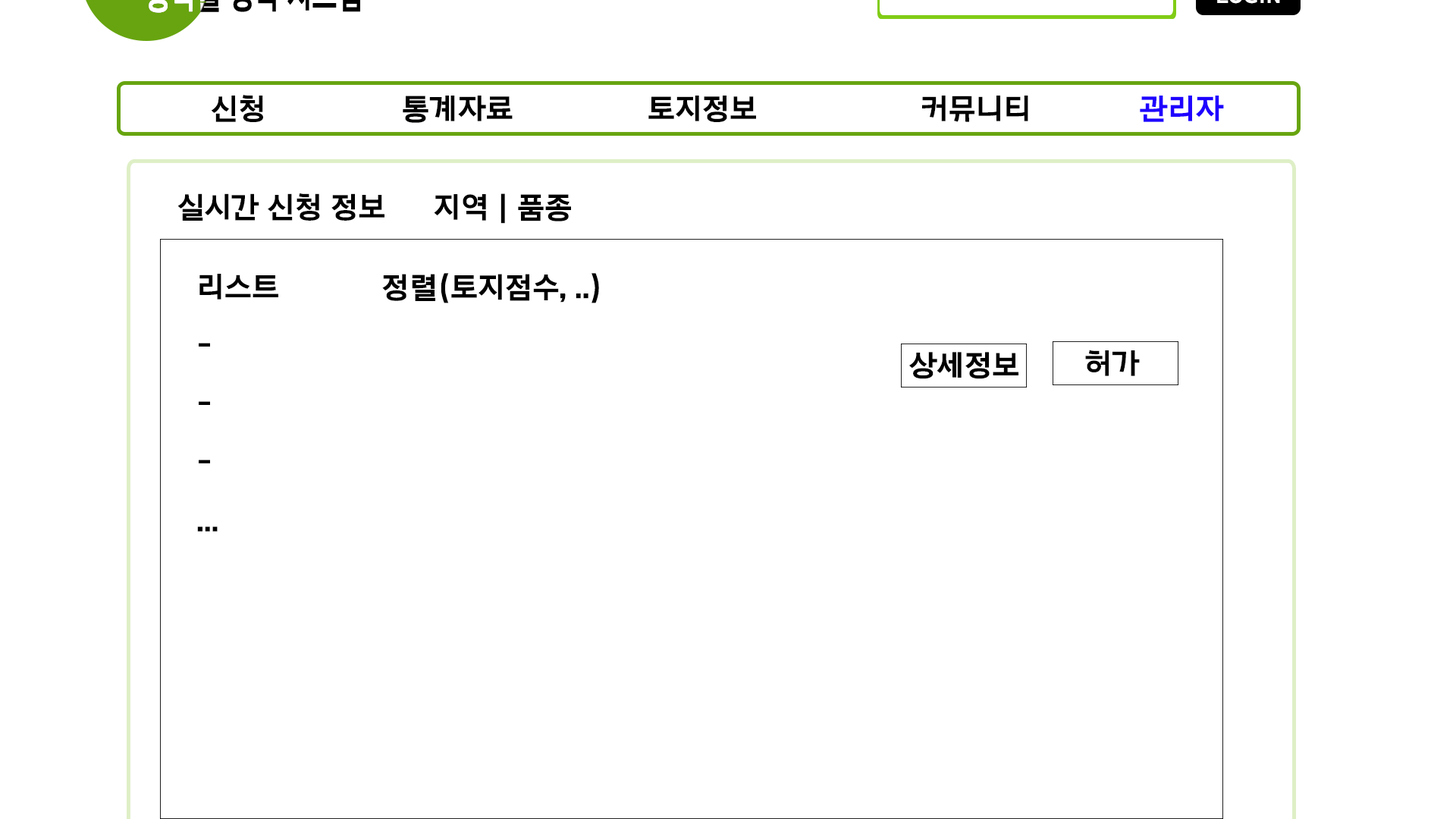
<style>
.page{position:relative;width:1456px;height:819px;background:#ffffff}
.page>*{position:absolute;margin:0}
.t1{font:30.3px "Arita-dotum-Bold_TTF";color:#000000}
.t2{font:30.3px "Arita-dotum-Bold_TTF";color:#1e00ff}
.t3{font:30.3px/58.4px "Arita-dotum-Bold_TTF";color:#000000}
</style>
<div class="page">
<p class="t1" style="left:211px;top:95px;width:1013px;height:28px">신청      통계자료     토지정보      커뮤니티    <span class="t2">관리자</span></p>
<p class="t1" style="left:177px;top:193px;width:207px;height:28px">실시간 신청 정보</p>
<p class="t1" style="left:434px;top:193px;width:137px;height:31px">지역 | 품종</p>
<p class="t3" style="left:197px;top:274px;width:81px;height:258px">리스트<br>-<br>-<br>-<br>...</p>
<p class="t1" style="left:382px;top:273px;width:217px;height:30px">정렬(토지점수, ..)</p>
<p class="t1" style="left:909px;top:352px;width:109px;height:27px">상세정보</p>
<p class="t1" style="left:1085px;top:350px;width:55px;height:26px">허가</p>
</div>
